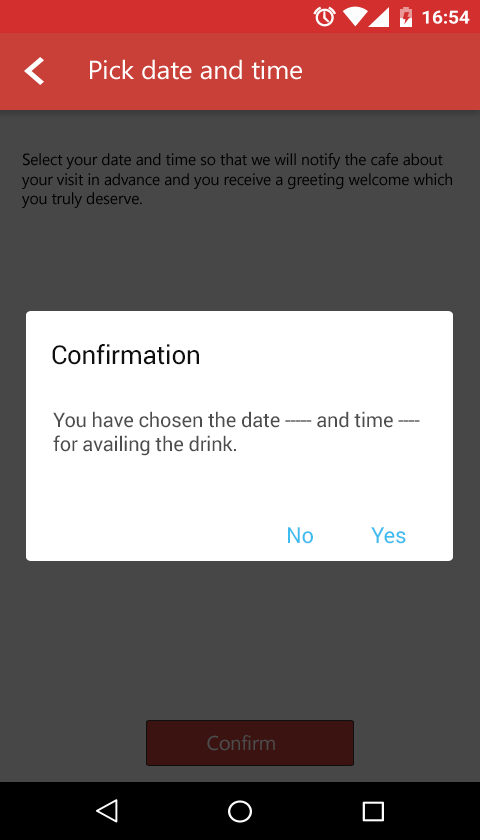
<style>
.page{position:relative;width:480px;height:840px;background:#474747}
.page>*{position:absolute;margin:0}
.t1{font:26.1px "SegoeUI";letter-spacing:-0.01em;color:#ffffff;scale:1.03 1}
.t2{font:16px "SegoeUISymbol";letter-spacing:-0.01em;color:#000000}
.t3{font:26px "Roboto-Regular";letter-spacing:-0.01em;color:#0f0f0f}
.t4{font:20px "Roboto-Regular";letter-spacing:-0.01em;color:#4d4d4d}
.t5{font:22px "Roboto-Regular";letter-spacing:-0.01em;color:#3fbcef}
</style>
<div class="page">
<p class="t1" style="left:90px;top:59px;width:212px;height:21px">Pick date and time</p>
<p class="t2" style="left:22px;top:153px;width:430px;height:55px">Select your date and time so that we will notify the cafe about <br>your visit in advance and you receive a greeting welcome which <br>you truly deserve.</p>
<p class="t3" style="left:52px;top:344px;width:147px;height:21px">Confirmation</p>
<p class="t4" style="left:53px;top:411px;width:367px;height:45px">You have chosen the date ----- and time ---- <br>for availing the drink.</p>
<p class="t5" style="left:288px;top:527px;width:25px;height:17px">No</p>
<p class="t5" style="left:371px;top:527px;width:35px;height:17px">Yes</p>
</div>
